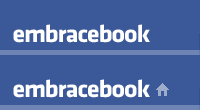
<style>
.page{position:relative;width:200px;height:110px;background:#3b5998}
.page>*{position:absolute;margin:0}
.t1{font:25px "Klavika-Bold";letter-spacing:-0.04em;color:#ffffff;scale:1.04 1}
</style>
<div class="page">
<p class="t1" style="left:13px;top:24px;width:137px;height:19px">embracebook</p>
<p class="t1" style="left:13px;top:79px;width:137px;height:19px">embracebook</p>
</div>
